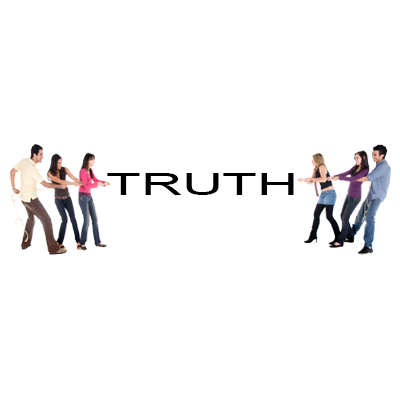
<style>
.page{position:relative;width:400px;height:400px;background:#ffffff}
.page>*{position:absolute;margin:0}
.t1{font:31.3px "ArialMT";color:#000000;scale:1.81 1}
</style>
<div class="page">
<p class="t1" style="left:107px;top:173px;width:187px;height:22px">TRUTH</p>
</div>
